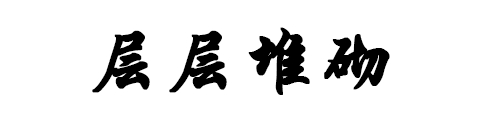
<style>
.page{position:relative;width:480px;height:120px;background:#ffffff}
.page>*{position:absolute;margin:0}
.t1{font:75px "STXingkai";color:#000000;font-weight:bold}
</style>
<div class="page">
<p class="t1" style="left:92px;top:27px;width:298px;height:68px">层层堆砌</p>
</div>
